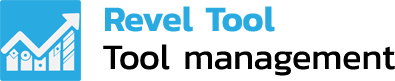
<style>
.page{position:relative;width:395px;height:81px;background:#ffffff}
.page>*{position:absolute;margin:0}
.t1{font:36px "Kanit-SemiBold";color:#29abe2}
.t2{font:36px "Kanit-Regular";color:#000000}
</style>
<div class="page">
<p class="t1" style="left:105px;top:6px;width:170px;height:26px">Revel Tool</p>
<p class="t2" style="left:103px;top:44px;width:292px;height:32px">Tool management</p>
</div>
